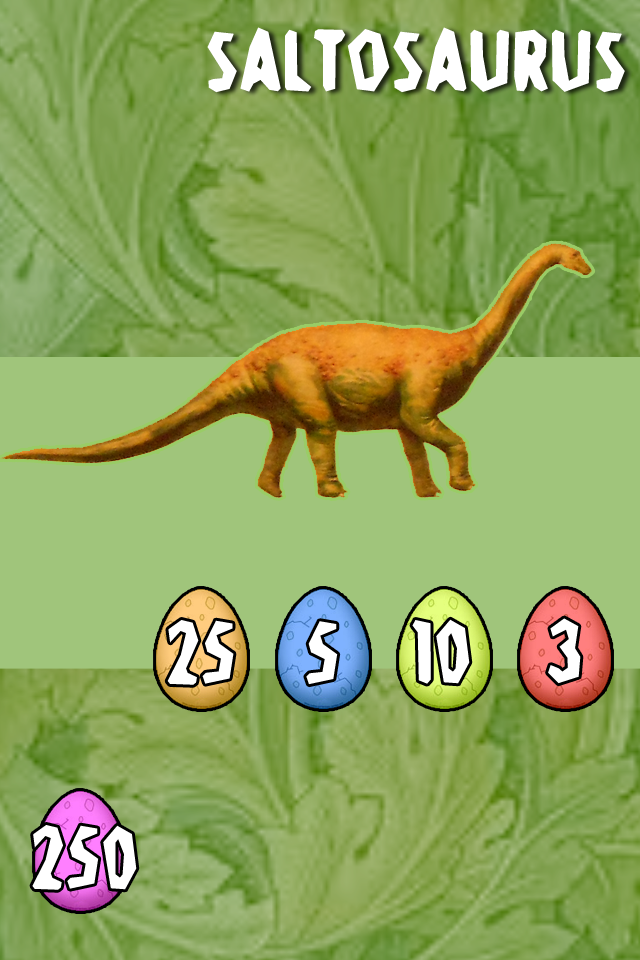
<style>
.page{position:relative;width:640px;height:960px;background:#a0c57b}
.page>*{position:absolute;margin:0}
.t1{font:96px "Stone-Age";color:#ffffff}
</style>
<div class="page">
<p class="t1" style="left:207px;top:27px;width:418px;height:66px">Saltosaurus</p>
<p class="t1" style="left:167px;top:620px;width:67px;height:65px">25</p>
<p class="t1" style="left:306px;top:621px;width:32px;height:64px">5</p>
<p class="t1" style="left:412px;top:619px;width:58px;height:65px">10</p>
<p class="t1" style="left:548px;top:618px;width:33px;height:66px">3</p>
<p class="t1" style="left:32px;top:825px;width:105px;height:65px">250</p>
</div>
